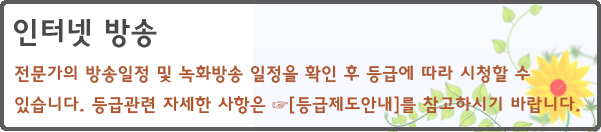
<style>
.page{position:relative;width:601px;height:132px;background:#ffffff}
.page>*{position:absolute;margin:0}
.t1{font:30px "HaanYGodic24";color:#494949}
.t2{font:18px "HaanYGodic24";color:#ae5731}
</style>
<div class="page">
<p class="t1" style="left:14px;top:19px;width:143px;height:29px">인터넷 방송</p>
<p class="t2" style="left:14px;top:64px;width:566px;height:50px">전문가의 방송일정 및 녹화방송 일정을 확인 후 등급에 따라 시청할 수 있습니다. 등급관련 자세한 사항은 ☞[등급제도안내]를 참고하시기 바랍니다.</p>
</div>
